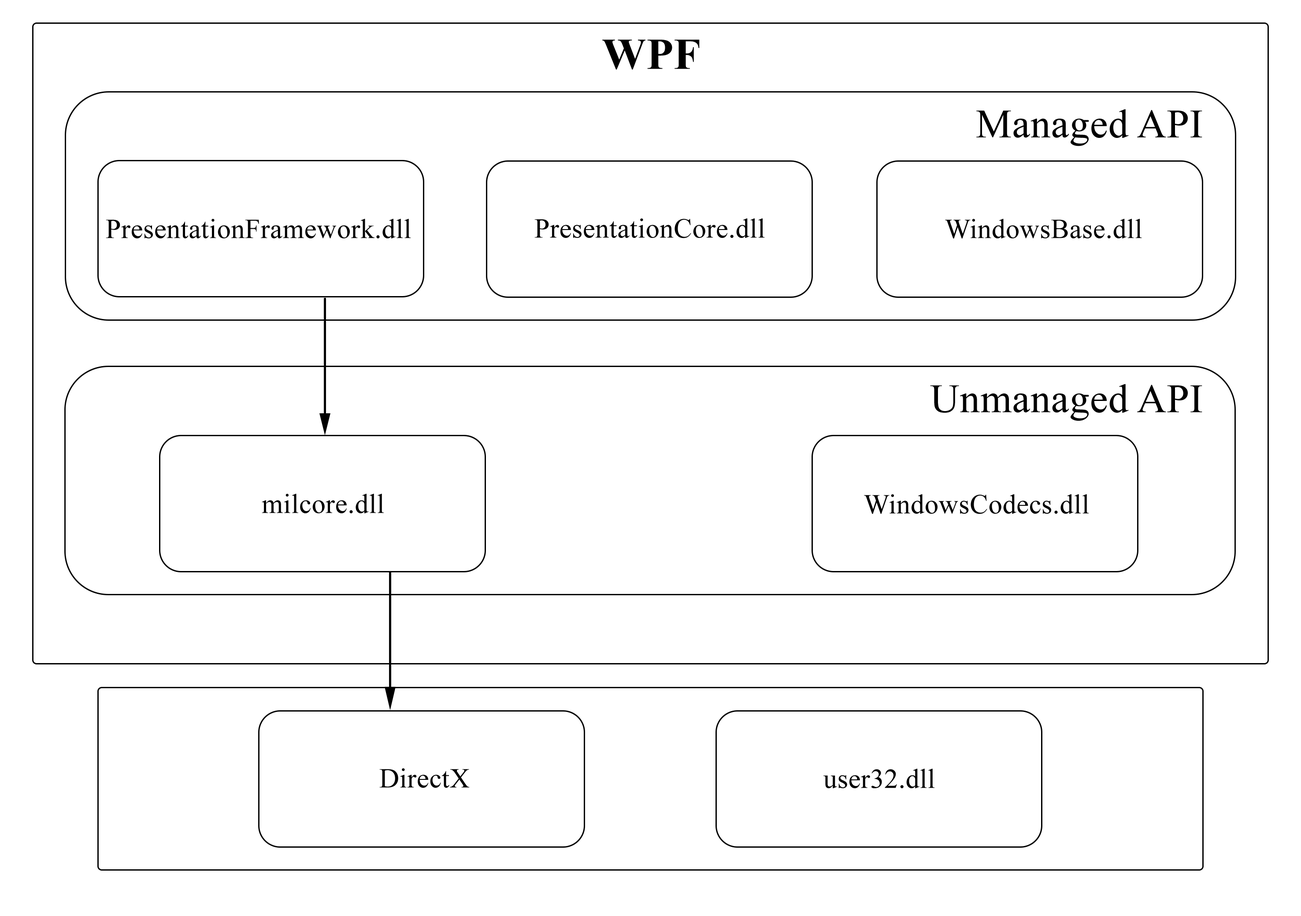
<style>
.page{position:relative;width:1301px;height:916px;background:#ffffff}
.page>*{position:absolute;margin:0}
.t1{font:44.1px "TimesNewRomanPS-BoldMT";letter-spacing:0.01em;color:#000000}
.t2{font:40.4px "TimesNewRomanPSMT";letter-spacing:0.01em;color:#000000}
.t3{font:27.5px "TimesNewRomanPSMT";letter-spacing:0.01em;color:#000000}
</style>
<div class="page">
<p class="t1" style="left:602px;top:40px;width:98px;height:30px">WPF</p>
<p class="t2" style="left:977px;top:109px;width:226px;height:37px">Managed API</p>
<p class="t3" style="left:106px;top:219px;width:305px;height:19px">PresentationFramework.dll</p>
<p class="t3" style="left:535px;top:218px;width:230px;height:20px">PresentationCore.dll</p>
<p class="t3" style="left:945px;top:219px;width:197px;height:20px">WindowsBase.dll</p>
<p class="t2" style="left:930px;top:384px;width:273px;height:37px">Unmanaged API</p>
<p class="t3" style="left:262px;top:494px;width:122px;height:19px">milcore.dll</p>
<p class="t3" style="left:864px;top:494px;width:225px;height:20px">WindowsCodecs.dll</p>
<p class="t3" style="left:379px;top:768px;width:91px;height:20px">DirectX</p>
<p class="t3" style="left:824px;top:769px;width:111px;height:19px">user32.dll</p>
</div>
